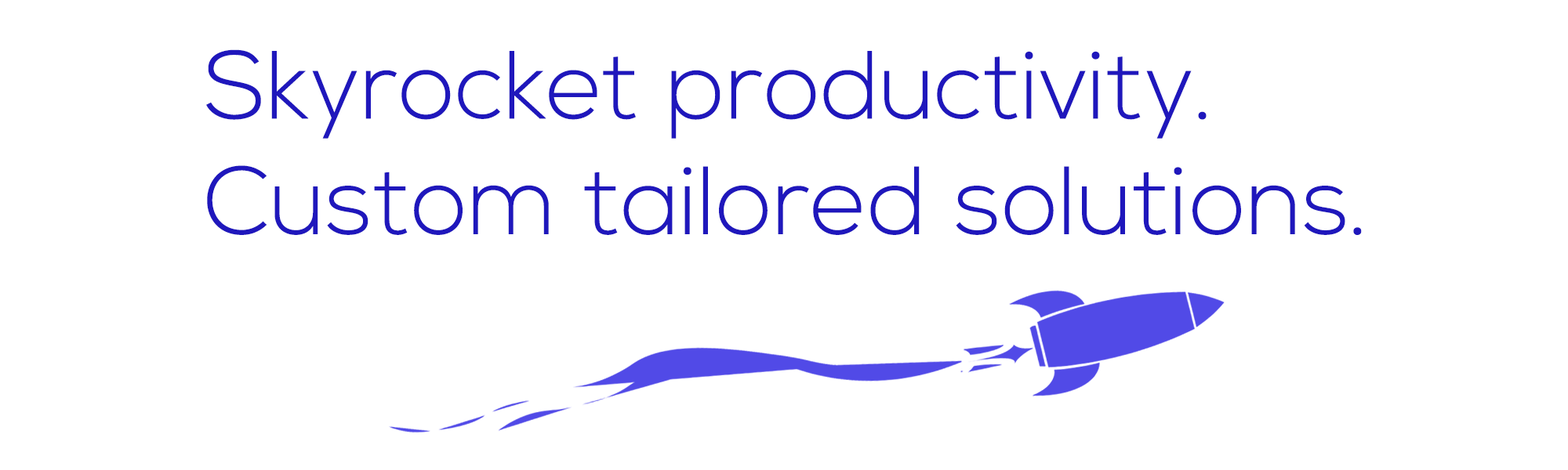
<style>
.page{position:relative;width:1568px;height:470px;background:#ffffff}
.page>*{position:absolute;margin:0}
.t1{font:96.4px "NexaLight";color:#1f17bc}
</style>
<div class="page">
<p class="t1" style="left:206px;top:49px;width:1156px;height:186px">Skyrocket productivity.<br>Custom tailored solutions.</p>
</div>
